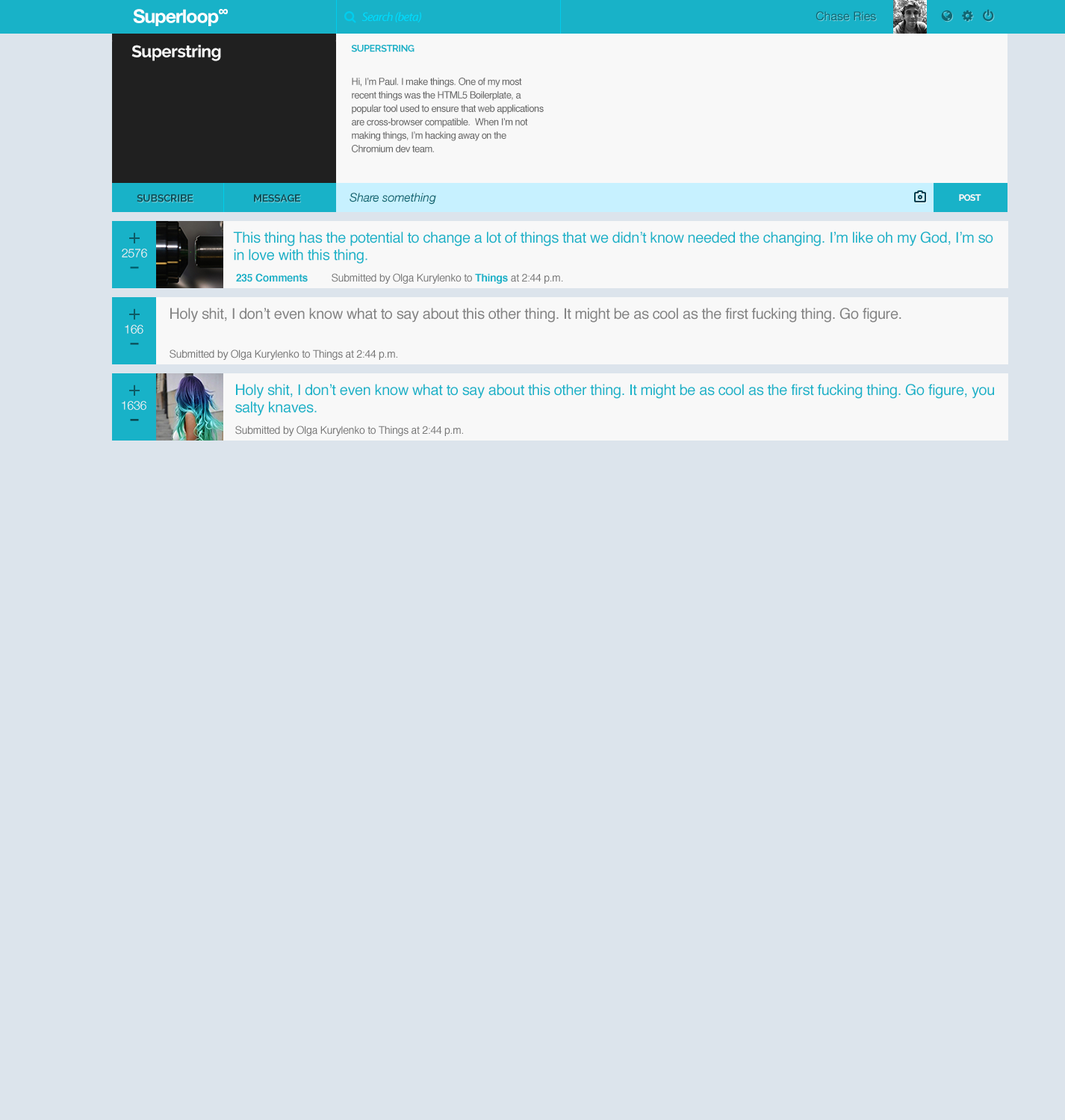
<style>
.page{position:relative;width:1065px;height:1120px;background:#dce4ec}
.page>*{position:absolute;margin:0}
.t1{font:18.7px "HelveticaNeue-Bold";letter-spacing:-0.04em;color:#ffffff}
.t2{font:12.7px "Helvetica-Bold";letter-spacing:-0.04em;color:#ffffff}
.t3{font:12.4px "MyriadPro-It";letter-spacing:-0.04em;color:#00dcff}
.t4{font:11.9px "HelveticaNeue";color:#106773}
.t5{font:16.6px "Raleway-Bold";letter-spacing:-0.02em;color:#f8f8f8}
.t6{font:9.7px "Raleway-Bold";letter-spacing:-0.04em;color:#18b2c8}
.t7{font:9.7px/13.4px "Helvetica";letter-spacing:-0.04em;color:#666666}
.t8{font:10.5px "Raleway-Bold";letter-spacing:-0.02em;color:#0e5059}
.t9{font:11.9px "HelveticaNeue-Italic";letter-spacing:-0.02em;color:#106773}
.t10{font:9px "Raleway-Bold";letter-spacing:-0.04em;color:#f8f8f8}
.t11{font:20.9px "HelveticaNeue";letter-spacing:-0.02em;color:#0d5b66}
.t12{font:14.9px/17.5px "Helvetica";letter-spacing:-0.02em;color:#18b2c8}
.t13{font:11.9px "HelveticaNeue-Light";letter-spacing:-0.02em;color:#f8f8f8}
.t14{font:10.5px "Helvetica-Bold";letter-spacing:-0.02em;color:#18b2c8}
.t15{font:10.5px "Helvetica";letter-spacing:-0.02em;color:#787878}
.t16{font:14.9px "Helvetica";letter-spacing:-0.02em;color:#838383}
</style>
<div class="page">
<p class="t1" style="left:133px;top:9px;width:86px;height:17px">Superloop</p>
<p class="t2" style="left:219px;top:9px;width:9px;height:5px">∞</p>
<p class="t3" style="left:361px;top:12px;width:60px;height:10px">Search (beta)</p>
<p class="t4" style="left:815px;top:11px;width:61px;height:10px">Chase Ries</p>
<p class="t5" style="left:131px;top:45px;width:90px;height:16px">Superstring</p>
<p class="t6" style="left:351px;top:45px;width:63px;height:7px">SUPERSTRING</p>
<p class="t7" style="left:352px;top:78px;width:192px;height:74px">Hi, I’m Paul. I make things. One of my most<br>recent things was the HTML5 Boilerplate, a<br>popular tool used to ensure that web applications <br>are cross-browser compatible.  When I’m not<br>making things, I’m hacking away on the <br>Chromium dev team.</p>
<p class="t8" style="left:137px;top:194px;width:56px;height:8px">SUBSCRIBE</p>
<p class="t8" style="left:254px;top:194px;width:46px;height:8px">MESSAGE</p>
<p class="t9" style="left:349px;top:193px;width:87px;height:12px">Share something</p>
<p class="t10" style="left:959px;top:194px;width:22px;height:7px">POST</p>
<p class="t11" style="left:129px;top:232px;width:11px;height:11px">+</p>
<p class="t12" style="left:233px;top:231px;width:760px;height:33px">This thing has the potential to change a lot of things that we didn’t know needed the changing. I’m like oh my God, I’m so<br>in love with this thing.</p>
<p class="t13" style="left:122px;top:249px;width:25px;height:9px">2576</p>
<p class="t14" style="left:236px;top:273px;width:72px;height:9px">235 Comments</p>
<p class="t15" style="left:332px;top:273px;width:231px;height:11px">Submitted by Olga Kurylenko to <span class="t14">Things </span>at 2:44 p.m.</p>
<p class="t11" style="left:129px;top:308px;width:11px;height:12px">+</p>
<p class="t16" style="left:170px;top:308px;width:731px;height:15px">Holy shit, I don’t even know what to say about this other thing. It might be as cool as the first fucking thing. Go figure.</p>
<p class="t13" style="left:125px;top:325px;width:18px;height:9px">166</p>
<p class="t15" style="left:169px;top:349px;width:228px;height:11px">Submitted by Olga Kurylenko to Things at 2:44 p.m.</p>
<p class="t11" style="left:129px;top:385px;width:11px;height:11px">+</p>
<p class="t12" style="left:235px;top:384px;width:759px;height:32px">Holy shit, I don’t even know what to say about this other thing. It might be as cool as the first fucking thing. Go figure, you<br>salty knaves.</p>
<p class="t13" style="left:122px;top:401px;width:24px;height:9px">1636</p>
<p class="t15" style="left:235px;top:426px;width:228px;height:10px">Submitted by Olga Kurylenko to Things at 2:44 p.m.</p>
</div>
